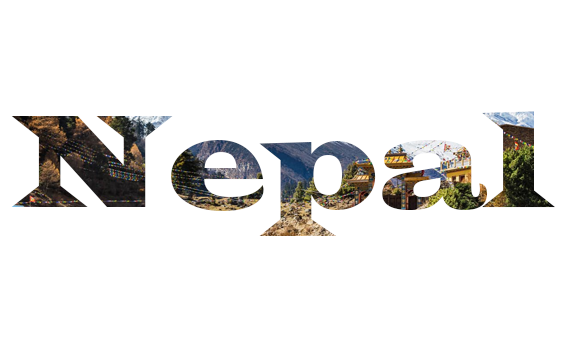
<style>
.page{position:relative;width:564px;height:362px;background:#ffffff}
.page>*{position:absolute;margin:0}
.t1{font:135.7px "LatinWide";scale:0.82 1}
</style>
<div class="page">
<p class="t1" style="left:11px;top:111px;width:544px;height:125px">Nepal</p>
</div>
